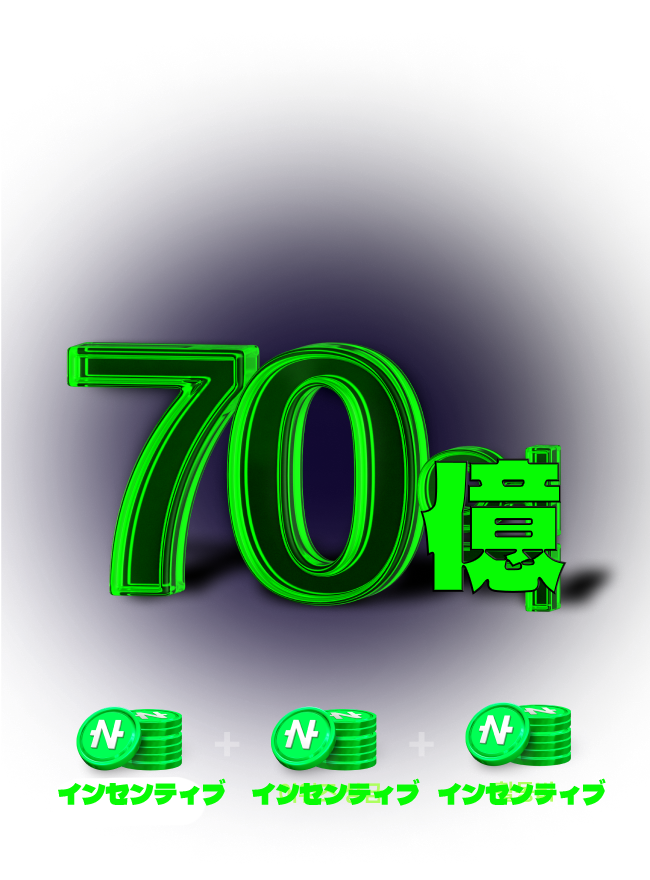
<style>
.page{position:relative;width:650px;height:880px}
.page>*{position:absolute;margin:0}
.t1{font:144px "DelaSukoGothicOne-R";color:#07fb04}
.t2{font:24px "DelaSukoGothicOne-R";color:#07fb04}
</style>
<div class="page">
<p class="t1" style="left:420px;top:458px;width:147px;height:137px">億</p>
<p class="t2" style="left:58px;top:778px;width:168px;height:28px">インセンティブ</p>
<p class="t2" style="left:252px;top:778px;width:168px;height:28px">インセンティブ</p>
<p class="t2" style="left:438px;top:778px;width:168px;height:28px">インセンティブ</p>
</div>
